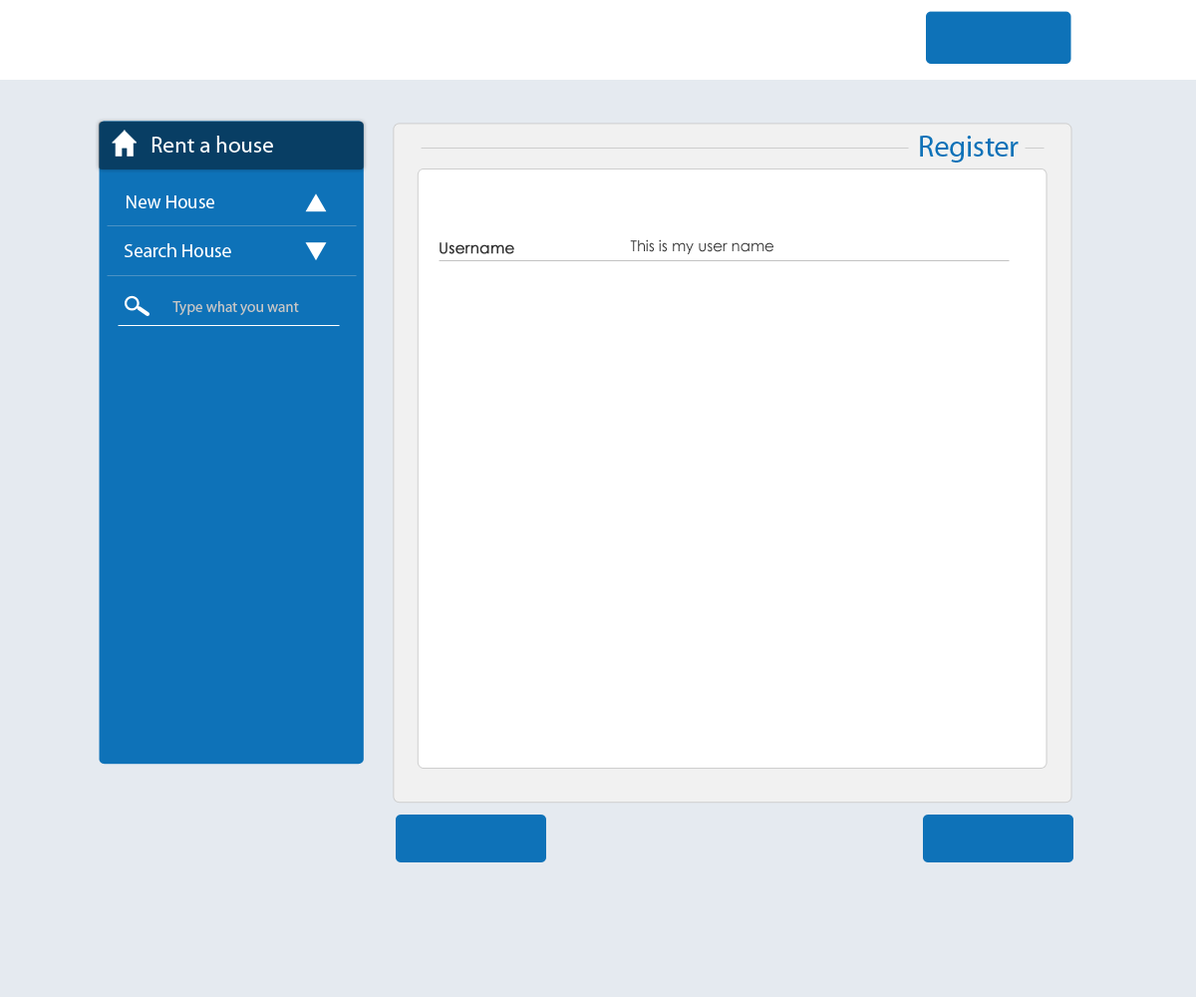
<style>
.page{position:relative;width:1196px;height:997px;background:#ffffff}
.page>*{position:absolute;margin:0}
.t1{font:22.9px "MyriadPro-Regular";color:#ffffff}
.t2{font:29.9px "MyriadPro-Regular";color:#0e72b8}
.t3{font:18.9px "MyriadPro-Regular";color:#ffffff}
.t4{font:15px "CenturyGothic";color:#323232;font-weight:bold}
.t5{font:15px "CenturyGothic";color:#323232}
.t6{font:15px "MyriadPro-Regular";color:#c5c5c5}
</style>
<div class="page">
<p class="t1" style="left:152px;top:136px;width:121px;height:17px">Rent a house</p>
<p class="t2" style="left:920px;top:136px;width:99px;height:26px">Register</p>
<p class="t3" style="left:127px;top:195px;width:87px;height:13px">New House</p>
<p class="t3" style="left:125px;top:243px;width:106px;height:14px">Search House</p>
<p class="t4" style="left:440px;top:242px;width:74px;height:12px">Username</p>
<p class="t5" style="left:630px;top:239px;width:144px;height:15px">This is my user name</p>
<p class="t6" style="left:172px;top:301px;width:127px;height:14px">Type what you want</p>
</div>
